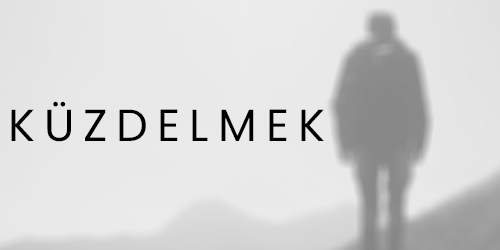
<style>
.page{position:relative;width:500px;height:250px}
.page>*{position:absolute;margin:0}
.t1{font:45px "Poppins-Regular";letter-spacing:0.2em;color:#000000}
</style>
<div class="page">
<p class="t1" style="left:11px;top:101px;width:313px;height:41px">KÜZDELMEK</p>
</div>
